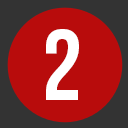
<style>
.page{position:relative;width:128px;height:128px;background:#b80c0c}
.page>*{position:absolute;margin:0}
.t1{font:100px "BebasNeue";color:#ffffff}
</style>
<div class="page">
<p class="t1" style="left:46px;top:29px;width:33px;height:71px">2</p>
</div>
